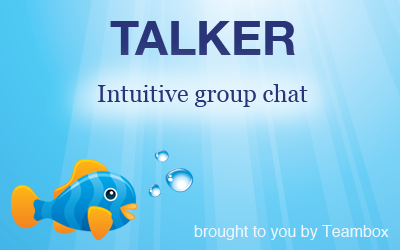
<style>
.page{position:relative;width:400px;height:250px}
.page>*{position:absolute;margin:0}
.t1{font:48px "HelveticaNeue-Bold";color:#293578}
.t2{font:24px "Georgia";color:#293578}
.t3{font:16px "Helvetica";color:#edf8fe}
</style>
<div class="page">
<p class="t1" style="left:110px;top:21px;width:185px;height:34px">TALKER</p>
<p class="t2" style="left:97px;top:84px;width:211px;height:23px">Intuitive group chat</p>
<p class="t3" style="left:194px;top:225px;width:195px;height:15px">brought to you by Teambox</p>
</div>
